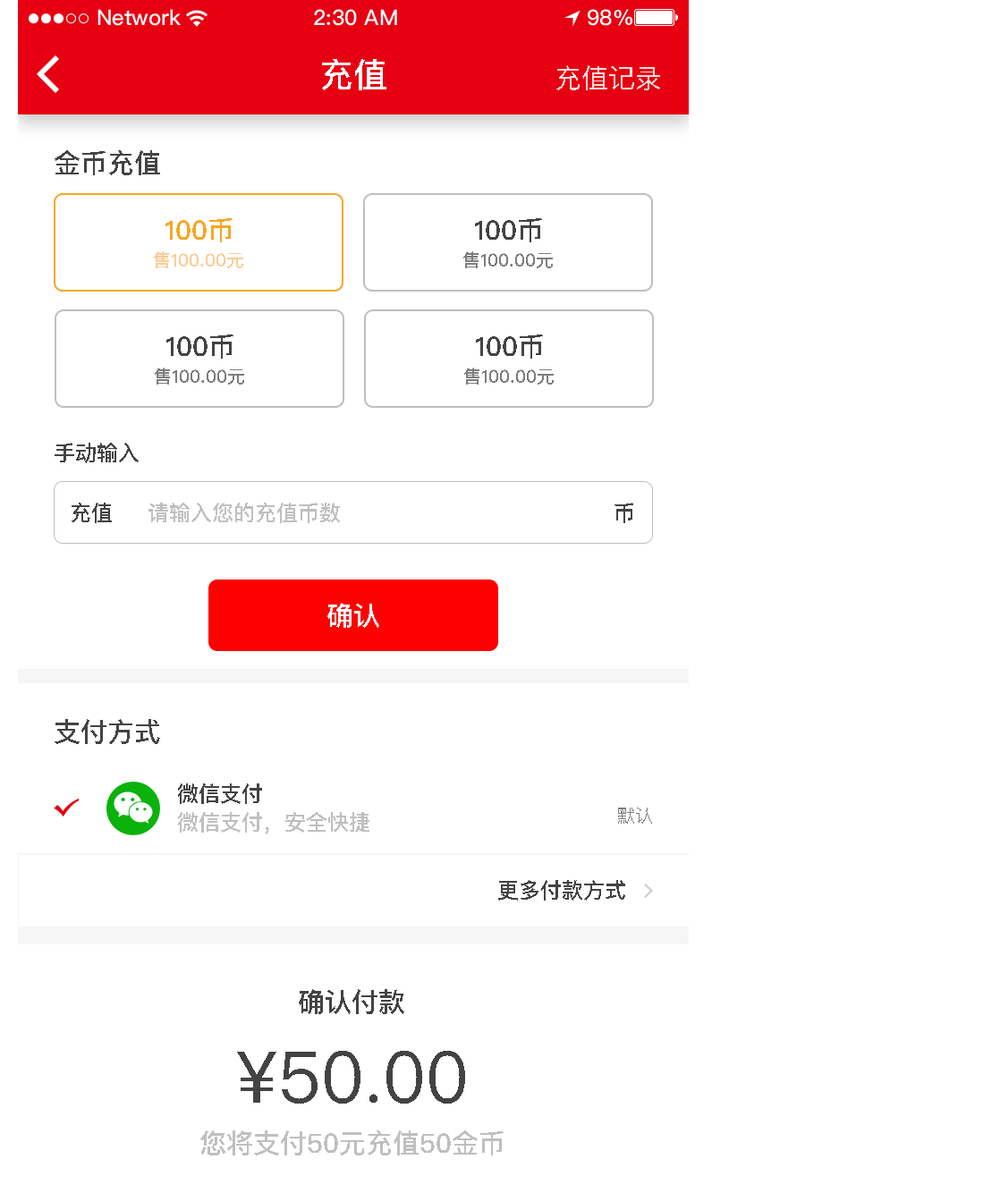
<style>
.page{position:relative;width:1000px;height:1193px;background:#ffffff}
.page>*{position:absolute;margin:0}
.t1{font:34px "PingFangSC-Medium";color:#ffffff;text-transform:uppercase}
.t2{font:26.8px "PingFangSC-Regular";color:#faddde;text-transform:uppercase}
.t3{font:26.8px "PingFangSC-Medium";color:#434343;text-transform:uppercase}
.t4{font:26.8px "PingFangSC-Medium";color:#f6a623;text-transform:uppercase}
.t5{font:17.9px "PingFangSC-Medium";color:#facc95;text-transform:uppercase}
.t6{font:17.9px "PingFangSC-Medium";color:#7d7d7d;text-transform:uppercase}
.t7{font:21.5px "PingFangSC-Medium";color:#434343;text-transform:uppercase}
.t8{font:21.5px "PingFangSC-Medium";color:#bfbfbf;text-transform:uppercase}
.t9{font:26.8px "PingFangSC-Medium";color:#ffffff;text-transform:uppercase}
.t10{font:17.9px "PingFangSC-Regular";color:#7d7d7d;text-transform:uppercase}
.t11{font:71.5px "PingFangSC-Regular";color:#434343;text-transform:uppercase}
.t12{font:26.8px "PingFangSC-Medium";color:#bfbfbf;text-transform:uppercase}
</style>
<div class="page">
<p class="t1" style="left:322px;top:59px;width:64px;height:31px">充值</p>
<p class="t2" style="left:556px;top:65px;width:104px;height:25px">充值记录</p>
<p class="t3" style="left:55px;top:150px;width:105px;height:25px">金币充值</p>
<p class="t4" style="left:165px;top:218px;width:67px;height:24px">100币</p>
<p class="t3" style="left:475px;top:218px;width:67px;height:24px">100币</p>
<p class="t5" style="left:154px;top:251px;width:89px;height:17px">售100.00元</p>
<p class="t6" style="left:463px;top:251px;width:90px;height:17px">售100.00元</p>
<p class="t3" style="left:166px;top:334px;width:67px;height:25px">100币</p>
<p class="t3" style="left:476px;top:334px;width:67px;height:25px">100币</p>
<p class="t6" style="left:155px;top:368px;width:89px;height:16px">售100.00元</p>
<p class="t6" style="left:464px;top:368px;width:89px;height:16px">售100.00元</p>
<p class="t7" style="left:55px;top:443px;width:84px;height:20px">手动输入</p>
<p class="t7" style="left:72px;top:503px;width:40px;height:20px">充值</p>
<p class="t8" style="left:148px;top:503px;width:192px;height:20px">请输入您的充值币数</p>
<p class="t7" style="left:614px;top:503px;width:19px;height:20px">币</p>
<p class="t9" style="left:327px;top:603px;width:52px;height:25px">确认</p>
<p class="t3" style="left:55px;top:719px;width:105px;height:25px">支付方式</p>
<p class="t7" style="left:178px;top:783px;width:84px;height:21px">微信支付</p>
<p class="t10" style="left:618px;top:807px;width:34px;height:17px">默认</p>
<p class="t8" style="left:178px;top:812px;width:191px;height:22px">微信支付，安全快捷</p>
<p class="t7" style="left:498px;top:880px;width:127px;height:20px">更多付款方式</p>
<p class="t3" style="left:299px;top:989px;width:105px;height:25px">确认付款</p>
<p class="t11" style="left:237px;top:1051px;width:228px;height:52px">¥50.00</p>
<p class="t12" style="left:200px;top:1130px;width:303px;height:25px">您将支付50元充值50金币</p>
</div>
